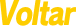
<style>
.page{position:relative;width:76px;height:26px;background:#fecd00}
.page>*{position:absolute;margin:0}
.t1{font:32px "RodinPro-EB";letter-spacing:-0.054em;color:#fecd00;font-style:italic;scale:0.84 1}
</style>
<div class="page">
<p class="t1" style="left:0px;top:0px;width:76px;height:26px">Voltar</p>
</div>
